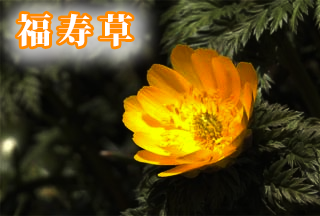
<style>
.page{position:relative;width:320px;height:216px}
.page>*{position:absolute;margin:0}
.t1{font:34px "KozMinPr6N-Heavy";letter-spacing:0.22em;color:#ffffff}
</style>
<div class="page">
<p class="t1" style="left:17px;top:13px;width:115px;height:34px">福寿草</p>
</div>
